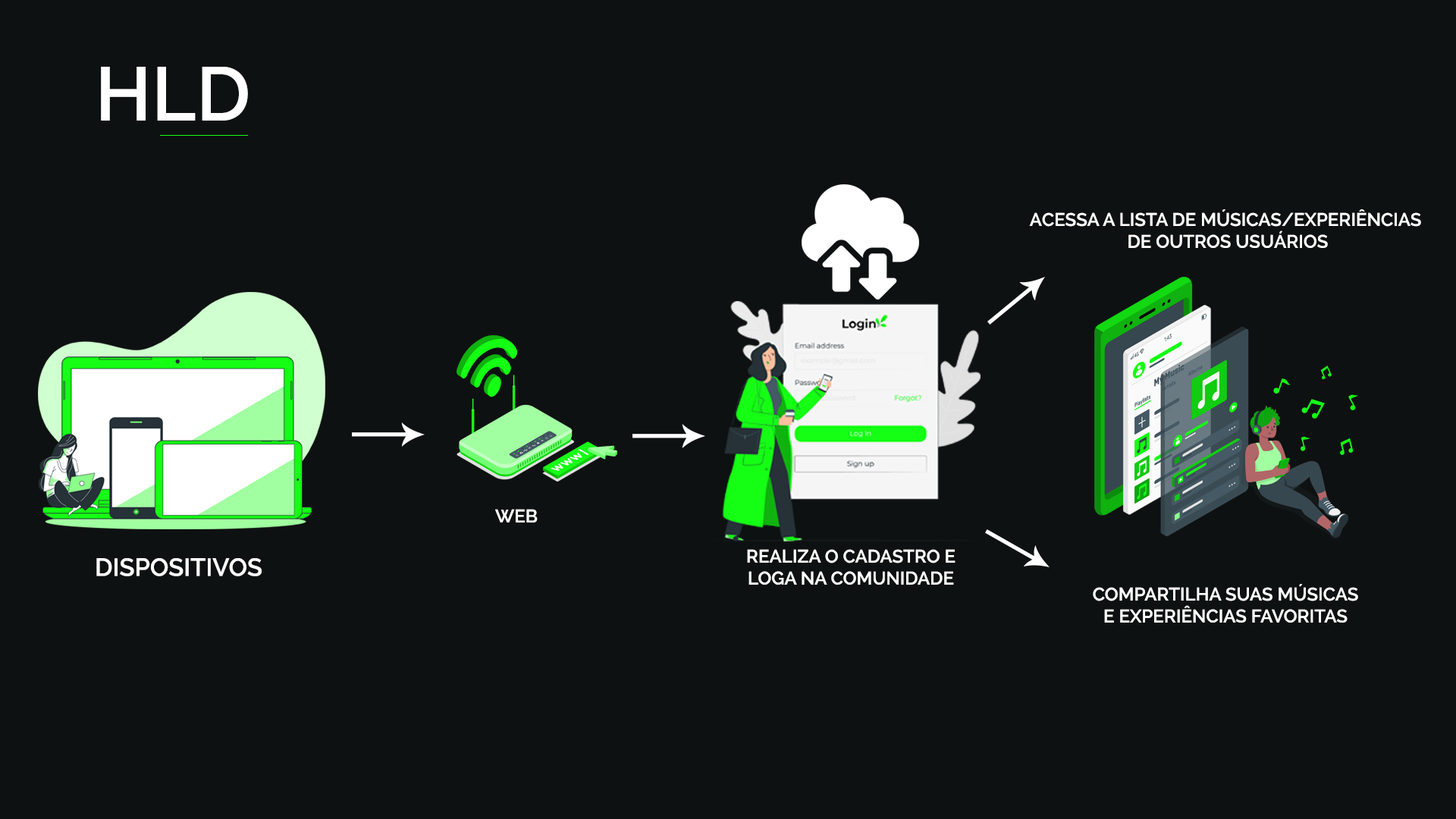
<style>
.page{position:relative;width:1456px;height:819px;background:#0e1111}
.page>*{position:absolute;margin:0}
.t1{font:75.8px "Raleway-SemiBold";color:#ffffff}
.t2{font:18.2px "Raleway-SemiBold";color:#ffffff}
.t3{font:24.8px "Raleway-SemiBold";color:#ffffff}
</style>
<div class="page">
<p class="t1" style="left:101px;top:67px;width:147px;height:54px">HLD</p>
<p class="t2" style="left:1029px;top:209px;width:392px;height:39px;text-align:center">ACESSA A LISTA DE MÚSICAS/EXPERIÊNCIAS <br>DE OUTROS USUÁRIOS</p>
<p class="t2" style="left:495px;top:509px;width:43px;height:13px">WEB</p>
<p class="t2" style="left:747px;top:549px;width:208px;height:36px;text-align:center">REALIZA O CADASTRO E<br>LOGA NA COMUNIDADE</p>
<p class="t3" style="left:96px;top:558px;width:166px;height:18px">DISPOSITIVOS</p>
<p class="t2" style="left:1093px;top:584px;width:265px;height:39px;text-align:center">COMPARTILHA SUAS MÚSICAS <br>E EXPERIÊNCIAS FAVORITAS</p>
</div>
